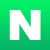
<style>
.page{position:relative;width:50px;height:50px;background:#ffffff}
.page>*{position:absolute;margin:0}
.t1{font:34.3px "HeadlineR-HM";color:#ffffff;scale:1.36 1}
</style>
<div class="page">
<p class="t1" style="left:9px;top:10px;width:32px;height:30px">N</p>
</div>
